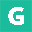
<style>
.page{position:relative;width:32px;height:32px;background:#1abc9c}
.page>*{position:absolute;margin:0}
.t1{font:25px "OpenSans-Extrabold";color:#ffffff}
</style>
<div class="page">
<p class="t1" style="left:8px;top:7px;width:16px;height:18px">G</p>
</div>
